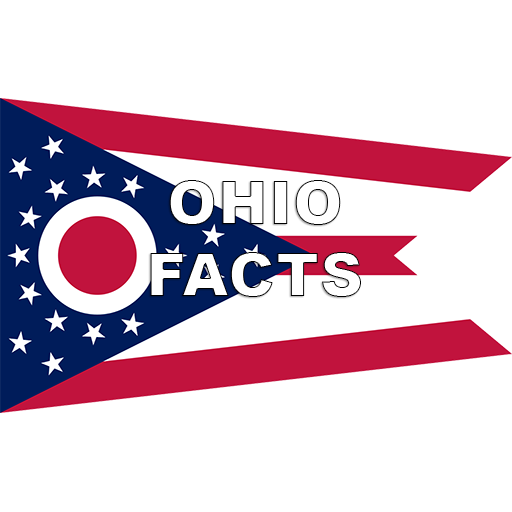
<style>
.page{position:relative;width:512px;height:512px;background:#ffffff}
.page>*{position:absolute;margin:0}
.t1{font:60px/19.3px "Arial-Black";letter-spacing:0.015em;color:#ffffff}
</style>
<div class="page">
<p class="t1" style="left:150px;top:180px;width:211px;height:117px;text-align:center">OHIO<br><br><br>FACTS</p>
</div>
